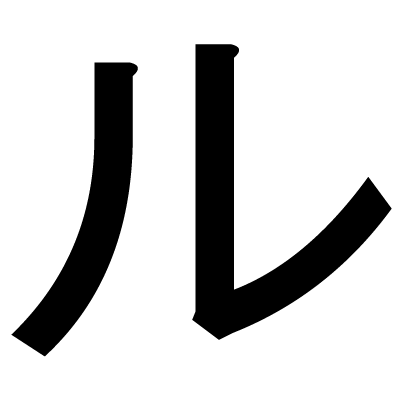
<style>
.page{position:relative;width:400px;height:400px;background:#ffffff}
.page>*{position:absolute;margin:0}
.t1{font:424.8px "MS-PGothic";color:#000000}
</style>
<div class="page">
<p class="t1" style="left:11px;top:44px;width:381px;height:313px">ル</p>
</div>
